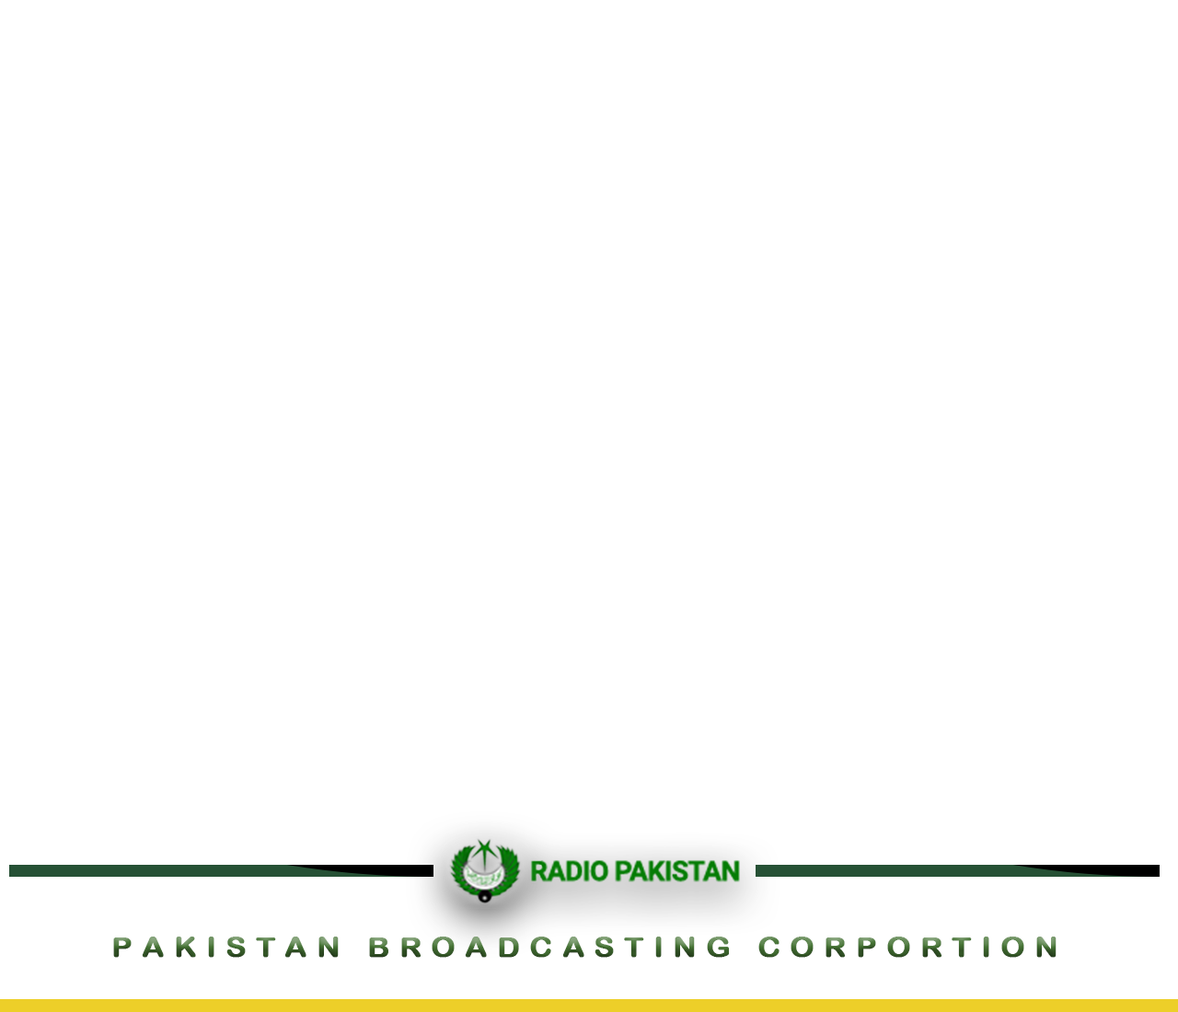
<style>
.page{position:relative;width:1178px;height:1012px;background:#ffffff}
.page>*{position:absolute;margin:0}
.t1{font:27.5px "ArialRoundedMTBold";letter-spacing:0.3em;font-weight:bold;scale:1.11 1}
</style>
<div class="page">
<p class="t1" style="left:113px;top:937px;width:943px;height:21px">PAKISTAN BROADCASTING CORPORTION</p>
</div>
